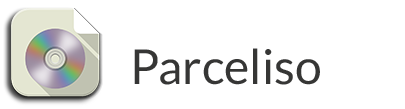
<style>
.page{position:relative;width:405px;height:109px;background:#ffffff}
.page>*{position:absolute;margin:0}
.t1{font:48px "Lato-Regular";color:#363635}
</style>
<div class="page">
<p class="t1" style="left:134px;top:48px;width:186px;height:37px">Parceliso</p>
</div>
